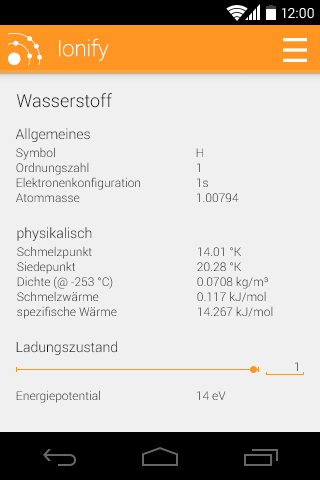
<style>
.page{position:relative;width:320px;height:480px;background:#f0f0f0}
.page>*{position:absolute;margin:0}
.t1{font:14px "Roboto-Regular";color:#ffffff}
.t2{font:22px "Roboto-Thin";color:#ffffff}
.t3{font:18px "Roboto-Light";color:#141414}
.t4{font:14px "Roboto-Light";color:#141414}
.t5{font:12px "Roboto-Light"}
</style>
<div class="page">
<p class="t1" style="left:282px;top:8px;width:32px;height:11px">12:00</p>
<p class="t2" style="left:59px;top:38px;width:50px;height:23px">Ionify</p>
<p class="t3" style="left:17px;top:93px;width:95px;height:15px">Wasserstoff</p>
<p class="t4" style="left:15px;top:128px;width:75px;height:14px">Allgemeines</p>
<p class="t5" style="left:16px;top:147px;width:187px;height:13px">Symbol    H</p>
<p class="t5" style="left:16px;top:162px;width:184px;height:13px">Ordnungszahl   1</p>
<p class="t5" style="left:16px;top:177px;width:192px;height:13px">Elektronenkonfiguration  1s</p>
<p class="t5" style="left:16px;top:193px;width:223px;height:9px">Atommasse    1.00794</p>
<p class="t4" style="left:17px;top:227px;width:75px;height:14px">physikalisch</p>
<p class="t5" style="left:17px;top:246px;width:224px;height:13px">Schmelzpunkt   14.01 °K</p>
<p class="t5" style="left:17px;top:261px;width:224px;height:13px">Siedepunkt    20.28 °K</p>
<p class="t5" style="left:17px;top:276px;width:251px;height:13px">Dichte (@ -253 °C)   0.0708 kg/m³</p>
<p class="t5" style="left:17px;top:291px;width:249px;height:11px">Schmelzwärme    0.117 kJ/mol</p>
<p class="t5" style="left:17px;top:306px;width:256px;height:13px">spezifische Wärme   14.267 kJ/mol</p>
<p class="t4" style="left:16px;top:341px;width:101px;height:14px">Ladungszustand</p>
<p class="t5" style="left:295px;top:362px;width:3px;height:9px">1</p>
<p class="t5" style="left:16px;top:390px;width:210px;height:13px">Energiepotential   14 eV</p>
</div>
